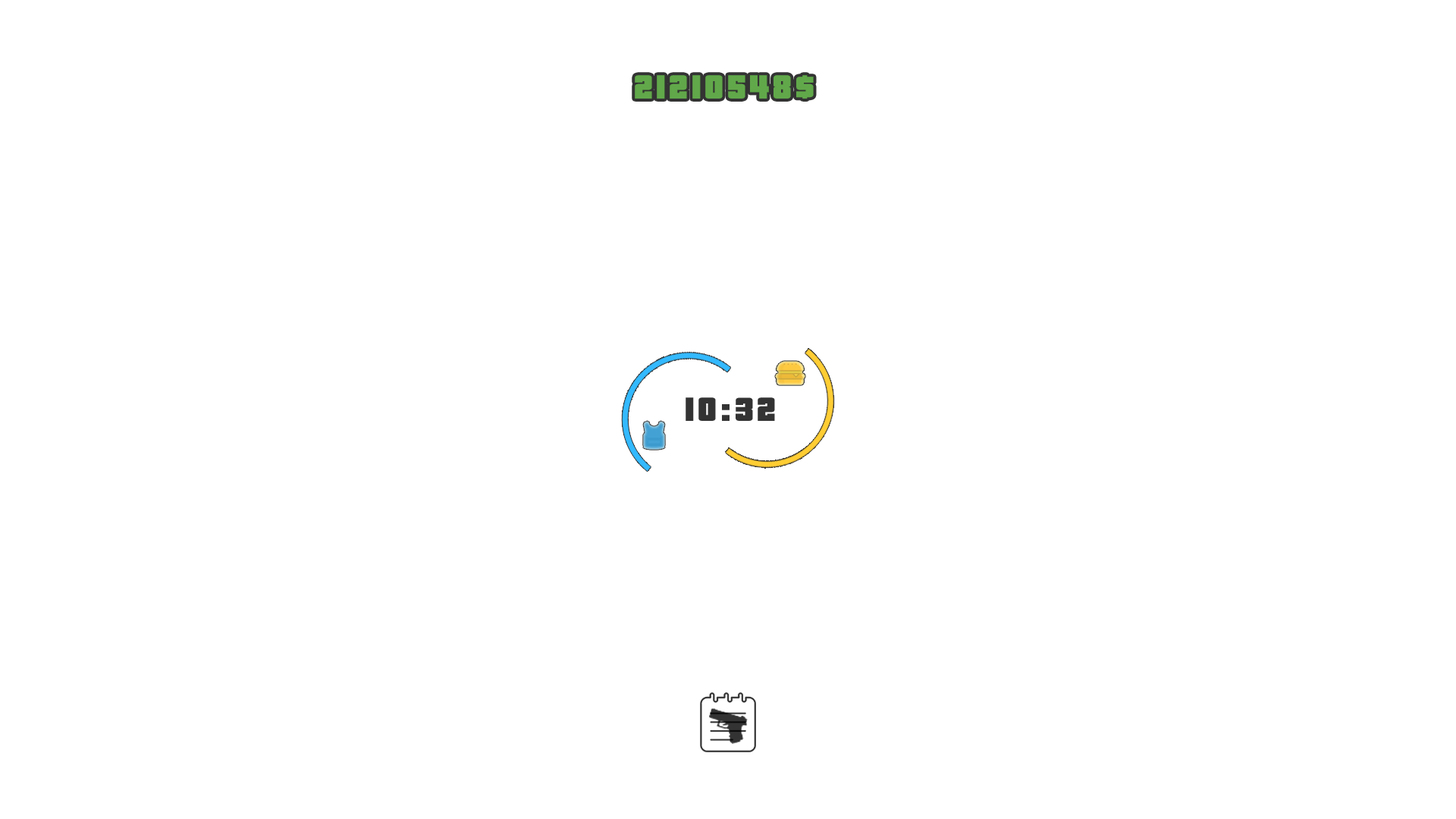
<style>
.page{position:relative;width:1456px;height:819px;background:#ffffff}
.page>*{position:absolute;margin:0}
.t1{font:36.4px "PricedownBl-Regular";letter-spacing:0.1em;color:#61a84a}
.t2{font:36.4px "PricedownBl-Regular";letter-spacing:0.1em;color:#333333}
</style>
<div class="page">
<p class="t1" style="left:635px;top:75px;width:179px;height:24px">21210548$</p>
<p class="t2" style="left:686px;top:397px;width:89px;height:24px">10:32</p>
</div>
